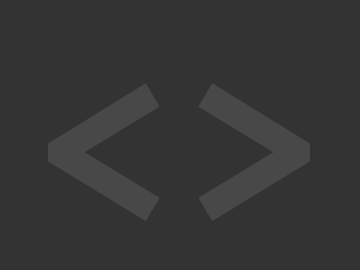
<style>
.page{position:relative;width:360px;height:270px;background:#333333}
.page>*{position:absolute;margin:0}
.t1{font:319.1px "BerkshireSwash-Regular";color:#484848;text-transform:uppercase}
</style>
<div class="page">
<p class="t1" style="left:48px;top:83px;width:262px;height:138px">&lt;&gt;</p>
</div>
